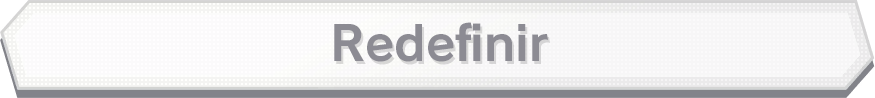
<style>
.page{position:relative;width:875px;height:98px;background:#fbfafb}
.page>*{position:absolute;margin:0}
.t1{font:48px "RodinPro-B";color:#8c8b93}
</style>
<div class="page">
<p class="t1" style="left:334px;top:22px;width:214px;height:40px">Redefinir</p>
</div>
